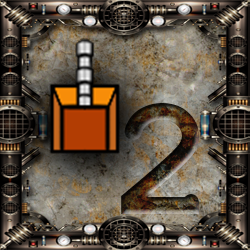
<style>
.page{position:relative;width:250px;height:250px}
.page>*{position:absolute;margin:0}
.t1{font:171px "CourierNewPS-BoldMT"}
</style>
<div class="page">
<p class="t1" style="left:121px;top:103px;width:79px;height:111px">2</p>
</div>
